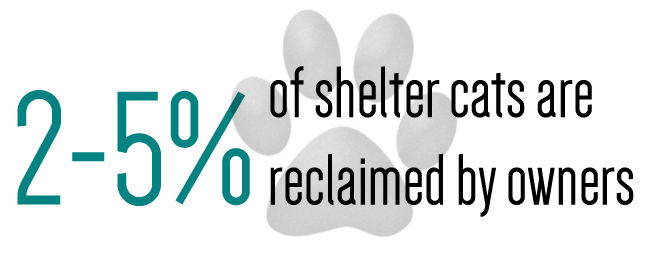
<style>
.page{position:relative;width:649px;height:254px;background:#ffffff}
.page>*{position:absolute;margin:0}
.t1{font:75px/87.5px "Dense-Regular";color:#000000}
.t2{font:166.7px "Dense-Regular";color:#028482}
</style>
<div class="page">
<p class="t1" style="left:270px;top:66px;width:364px;height:151px">of shelter cats are <br>reclaimed by owners</p>
<p class="t2" style="left:17px;top:90px;width:233px;height:116px">2-5%</p>
</div>
